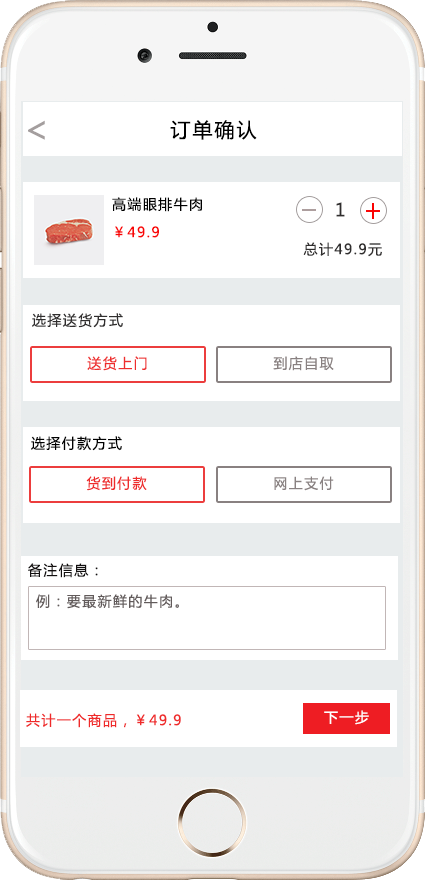
<style>
.page{position:relative;width:425px;height:880px;background:#ffffff}
.page>*{position:absolute;margin:0}
.t1{font:36px "MicrosoftYaHei";letter-spacing:0.1em;color:#a49e9e}
.t2{font:20px "MicrosoftYaHei";letter-spacing:0.1em;color:#000000}
.t3{font:14px/14px "MicrosoftYaHei";letter-spacing:0.1em;color:#000000}
.t4{font:14px/14px "MicrosoftYaHei";letter-spacing:0.1em;color:#f90606}
.t5{font:18px "MicrosoftYaHei";letter-spacing:0.1em;color:#302e2e}
.t6{font:14px "MicrosoftYaHei";letter-spacing:0.1em;color:#302e2e}
.t7{font:14px "MicrosoftYaHei";letter-spacing:0.1em;color:#ee2d2d}
.t8{font:14px "MicrosoftYaHei";letter-spacing:0.1em;color:#898181}
.t9{font:14px "MicrosoftYaHei";letter-spacing:0.1em;color:#000000}
.t10{font:14px "MicrosoftYaHei";letter-spacing:0.1em;color:#131010}
.t11{font:14px "MicrosoftYaHei";letter-spacing:0.1em;color:#625b5b}
.t12{font:14px "MicrosoftYaHei";letter-spacing:0.1em;color:#ef2a2a}
.t13{font:14px "MicrosoftYaHei";letter-spacing:0.1em;color:#ffffff}
</style>
<div class="page">
<p class="t1" style="left:28px;top:120px;width:17px;height:20px">&lt;</p>
<p class="t2" style="left:170px;top:120px;width:87px;height:20px">订单确认</p>
<p class="t3" style="left:112px;top:197px;width:90px;height:41px">高端眼排牛肉<br><br><span class="t4">￥49.9</span></p>
<p class="t5" style="left:336px;top:202px;width:9px;height:15px">1</p>
<p class="t6" style="left:303px;top:242px;width:79px;height:15px">总计49.9元</p>
<p class="t6" style="left:32px;top:313px;width:91px;height:15px">选择送货方式</p>
<p class="t7" style="left:87px;top:356px;width:60px;height:15px">送货上门</p>
<p class="t8" style="left:273px;top:356px;width:61px;height:15px">到店自取</p>
<p class="t9" style="left:31px;top:436px;width:91px;height:15px">选择付款方式</p>
<p class="t7" style="left:86px;top:476px;width:61px;height:15px">货到付款</p>
<p class="t8" style="left:274px;top:476px;width:60px;height:15px">网上支付</p>
<p class="t10" style="left:28px;top:563px;width:70px;height:15px">备注信息：</p>
<p class="t11" style="left:36px;top:594px;width:143px;height:15px">例：要最新鲜的牛肉。</p>
<p class="t12" style="left:26px;top:713px;width:155px;height:15px">共计一个商品，￥49.9</p>
<p class="t13" style="left:324px;top:710px;width:45px;height:15px">下一步</p>
</div>
